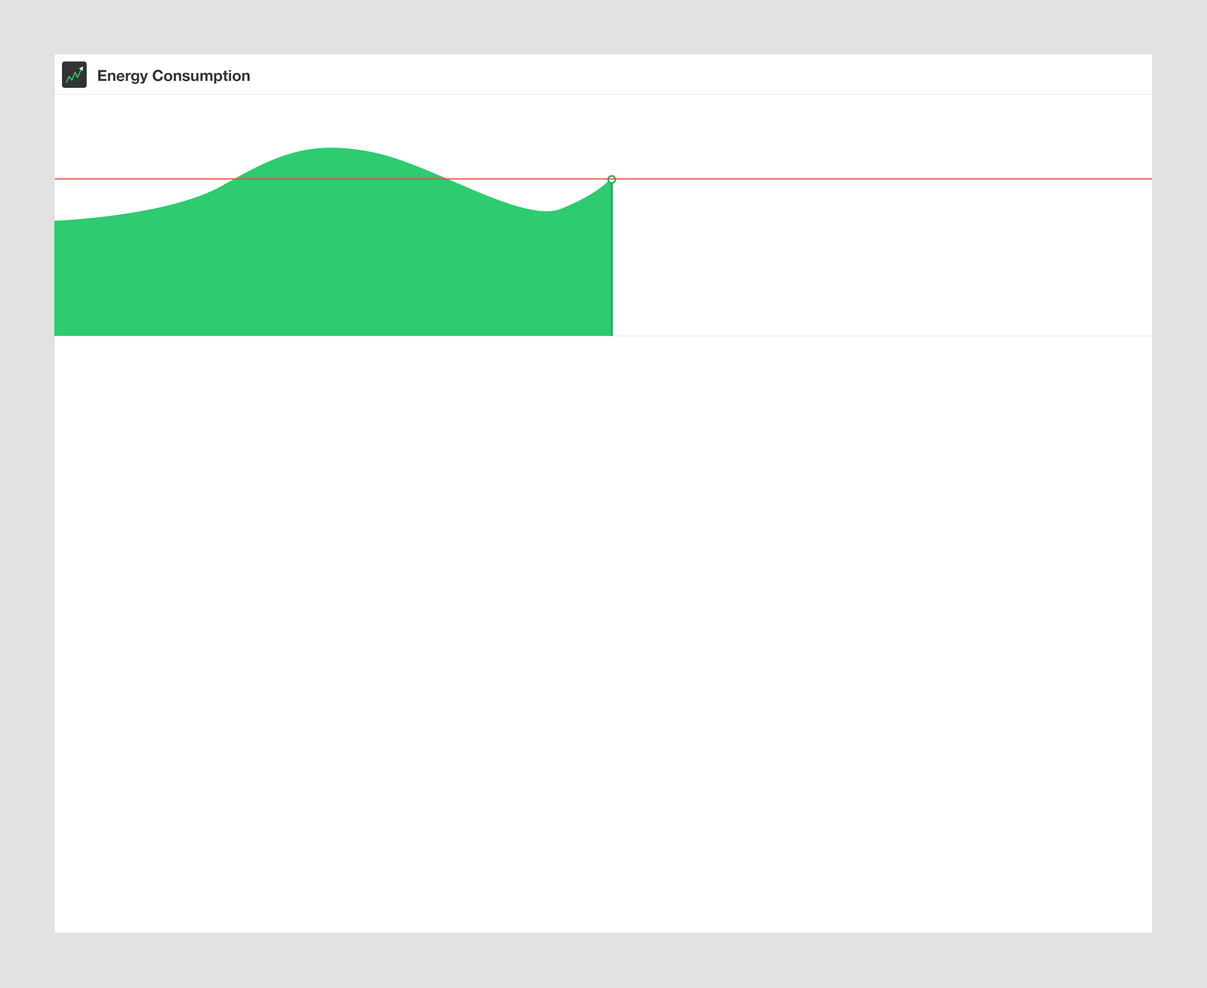
<style>
.page{position:relative;width:1207px;height:988px;background:#ffffff}
.page>*{position:absolute;margin:0}
.t1{font:15.4px "HelveticaNeue-Bold";color:#333333}
</style>
<div class="page">
<p class="t1" style="left:98px;top:70px;width:152px;height:14px">Energy Consumption</p>
</div>
